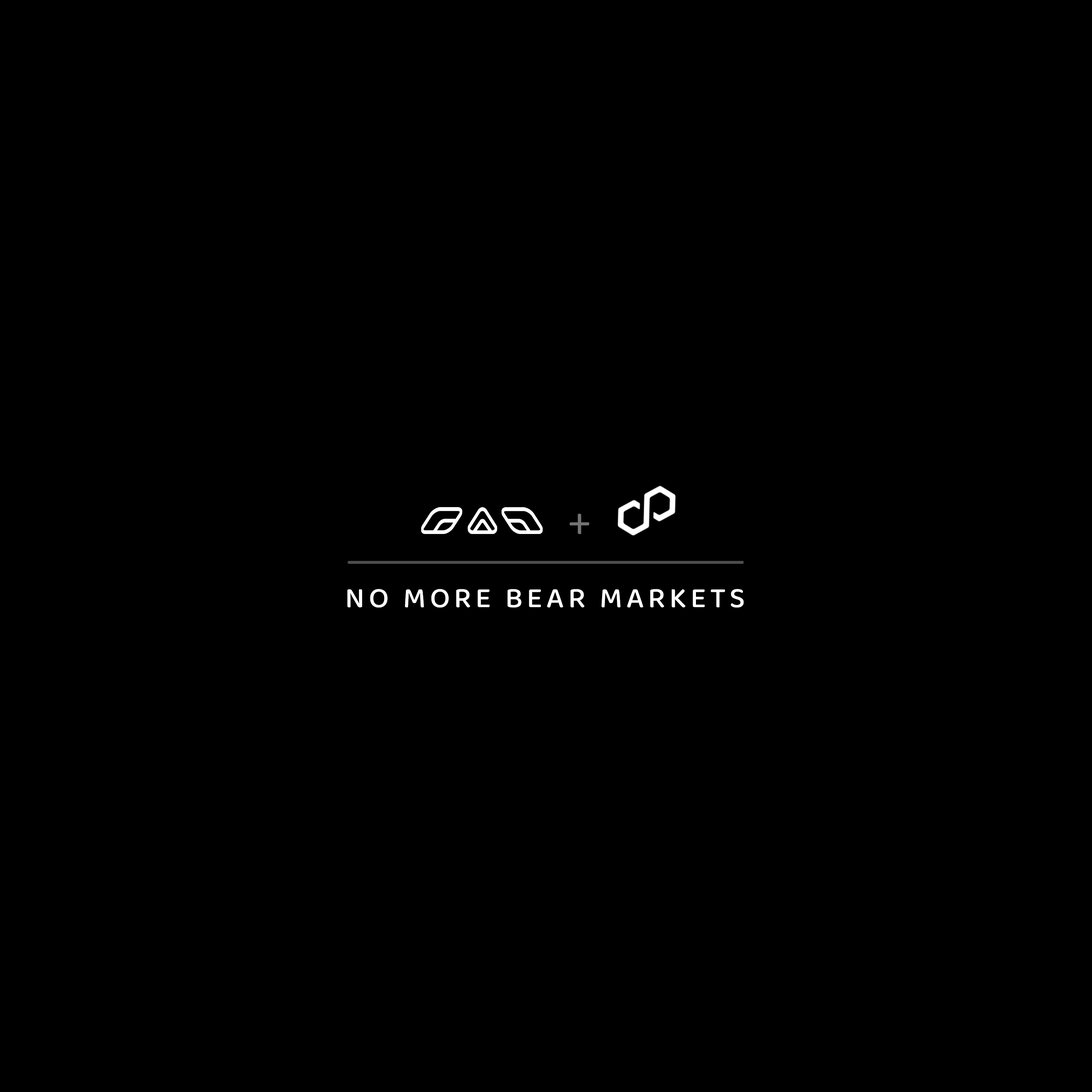
<style>
.page{position:relative;width:1092px;height:1092px;background:#000000}
.page>*{position:absolute;margin:0}
.t1{font:43.7px "BalooThambi2-Regular";letter-spacing:0.14em;color:#747474}
.t2{font:29.1px "BalooThambi2-Medium";letter-spacing:0.14em;color:#ffffff}
</style>
<div class="page">
<p class="t1" style="left:570px;top:514px;width:19px;height:20px">+</p>
<p class="t2" style="left:347px;top:589px;width:397px;height:19px">NO MORE BEAR MARKETS</p>
</div>
